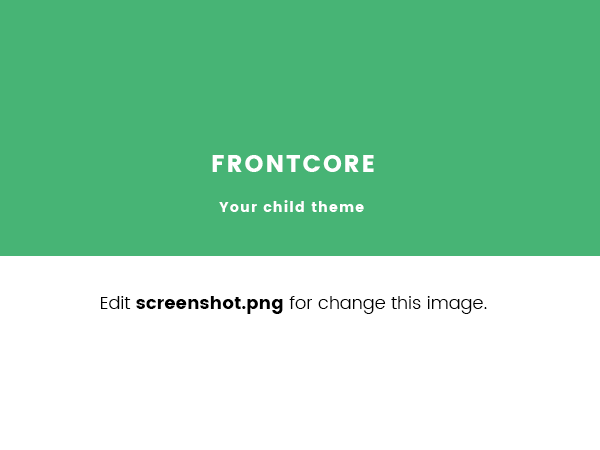
<style>
.page{position:relative;width:600px;height:450px;background:#47b475}
.page>*{position:absolute;margin:0}
.t1{font:24px "Poppins";letter-spacing:0.08em;color:#ffffff}
.t2{font:14px "Poppins";letter-spacing:0.08em;color:#ffffff}
.t3{font:18px "Poppins-Light";color:#000000}
.t4{font:18px "Poppins";color:#000000}
</style>
<div class="page">
<p class="t1" style="left:212px;top:155px;width:162px;height:17px">FRONTCORE</p>
<p class="t2" style="left:219px;top:200px;width:145px;height:12px">Your child theme</p>
<p class="t3" style="left:101px;top:296px;width:386px;height:18px">Edit <span class="t4">screenshot.png</span> for change this image.</p>
</div>
